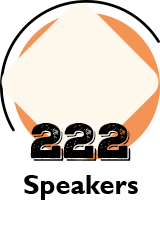
<style>
.page{position:relative;width:160px;height:234px;background:#ffffff}
.page>*{position:absolute;margin:0}
.t1{font:48px "NexaRustSlab-BlackShadow01";color:#000000}
.t2{font:27.4px "GillSansMT-Bold";color:#000000}
</style>
<div class="page">
<p class="t1" style="left:30px;top:123px;width:101px;height:38px">222</p>
<p class="t2" style="left:24px;top:175px;width:114px;height:25px">Speakers</p>
</div>
